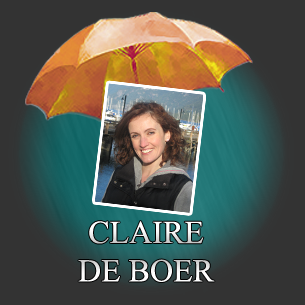
<style>
.page{position:relative;width:305px;height:305px;background:#333333}
.page>*{position:absolute;margin:0}
.t1{font:32px "TimesNewRomanPSMT";color:#ffffff}
</style>
<div class="page">
<p class="t1" style="left:78px;top:221px;width:137px;height:61px;text-align:center">CLAIRE<br>DE BOER</p>
</div>
